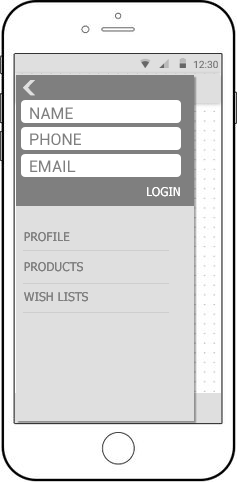
<style>
.page{position:relative;width:237px;height:482px;background:#ffffff}
.page>*{position:absolute;margin:0}
.t1{font:15.9px/26.3px "Roboto-Regular";letter-spacing:0.005em;color:#7f7f7f}
.t2{font:12px "Tahoma";color:#ffffff}
.t3{font:12px/30px "Tahoma";color:#7f7f7f}
</style>
<div class="page">
<p class="t1" style="left:30px;top:107px;width:51px;height:65px">NAME<br>PHONE<br>EMAIL</p>
<p class="t2" style="left:147px;top:187px;width:33px;height:10px">LOGIN</p>
<p class="t3" style="left:24px;top:232px;width:64px;height:70px">PROFILE<br>PRODUCTS<br>WISH LISTS</p>
</div>
